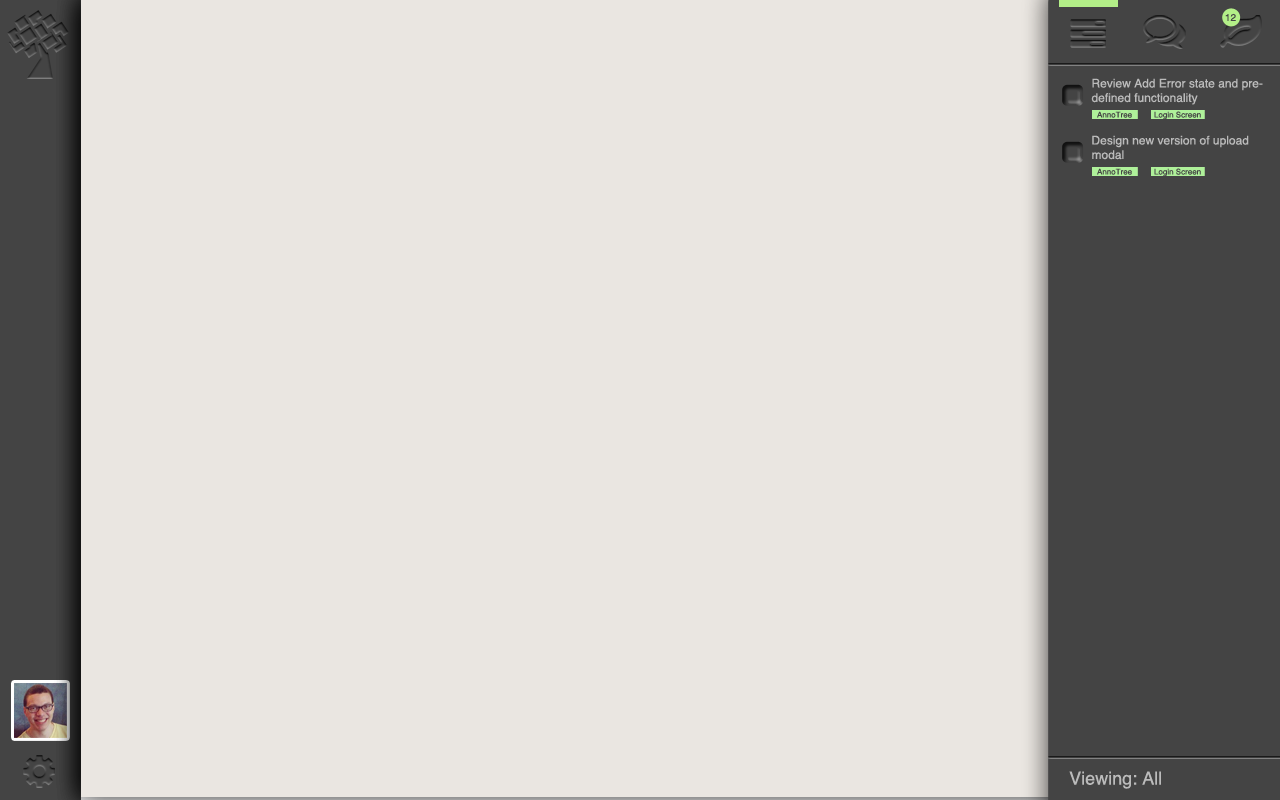
<style>
.page{position:relative;width:1280px;height:800px;background:#eae6e1}
.page>*{position:absolute;margin:0}
.t1{font:10px "Helvetica";color:#444444}
.t2{font:12px "Helvetica";color:#bbbbbb}
.t3{font:8px "Helvetica";color:#444444}
.t4{font:18px "Helvetica";color:#bbbbbb}
</style>
<div class="page">
<p class="t1" style="left:1225px;top:13px;width:11px;height:8px">12</p>
<p class="t2" style="left:1091px;top:78px;width:172px;height:27px">Review Add Error state and pre-<br>defined functionality</p>
<p class="t3" style="left:1097px;top:111px;width:35px;height:7px">AnnoTree</p>
<p class="t3" style="left:1154px;top:111px;width:47px;height:9px">Login Screen</p>
<p class="t2" style="left:1092px;top:135px;width:157px;height:25px">Design new version of upload<br>modal</p>
<p class="t3" style="left:1097px;top:168px;width:35px;height:7px">AnnoTree</p>
<p class="t3" style="left:1154px;top:168px;width:47px;height:9px">Login Screen</p>
<p class="t4" style="left:1069px;top:771px;width:92px;height:18px">Viewing: All</p>
</div>
